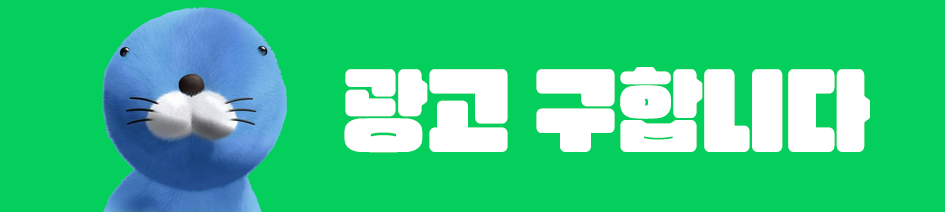
<style>
.page{position:relative;width:945px;height:212px;background:#04cf5c}
.page>*{position:absolute;margin:0}
.t1{font:93.3px "RixInooAriDuriR";letter-spacing:-0.001em;color:#ffffff}
</style>
<div class="page">
<p class="t1" style="left:344px;top:67px;width:526px;height:86px">광고 구합니다</p>
</div>
